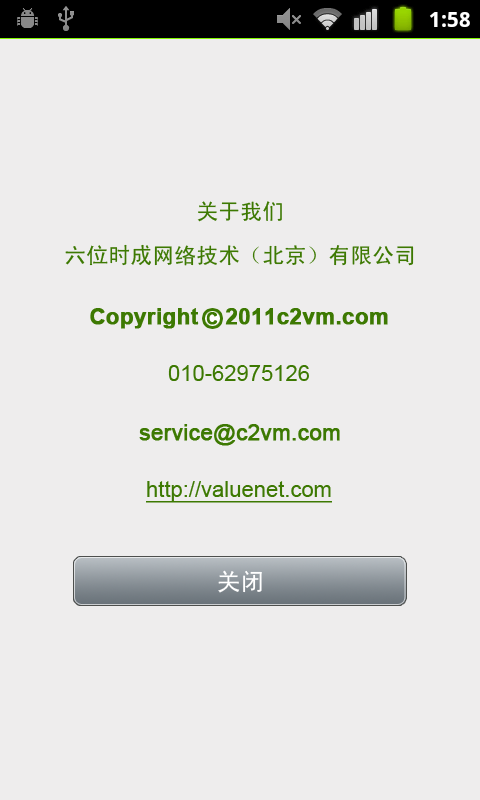
<style>
.page{position:relative;width:480px;height:800px;background:#eeeded}
.page>*{position:absolute;margin:0}
.t1{font:22px/44px "SimHei";color:#3d7902}
.t2{font:22px "Arial-BoldMT";color:#3d7902;font-weight:bold}
.t3{font:16px "Arial-BoldMT";color:#3d7902;font-weight:bold}
.t4{font:22px "ArialMT";color:#3d7902}
.t5{font:22px "ArialMT";color:#3d7902;font-weight:bold}
.t6{font:22px "ArialMT";color:#3d7902;text-decoration:underline}
.t7{font:24px "SimHei";color:#ffffff}
</style>
<div class="page">
<p class="t1" style="left:65px;top:201px;width:349px;height:65px;text-align:center">关于我们<br>六位时成网络技术（北京）有限公司</p>
<p class="t2" style="left:90px;top:308px;width:298px;height:21px">Copyright    2011c2vm.com</p>
<p class="t3" style="left:206px;top:312px;width:12px;height:13px">C</p>
<p class="t4" style="left:168px;top:365px;width:141px;height:16px">010-62975126</p>
<p class="t5" style="left:139px;top:424px;width:201px;height:22px">service@c2vm.com</p>
<p class="t6" style="left:146px;top:481px;width:186px;height:22px">http://valuenet.com</p>
<p class="t7" style="left:218px;top:570px;width:44px;height:23px">关闭</p>
</div>
